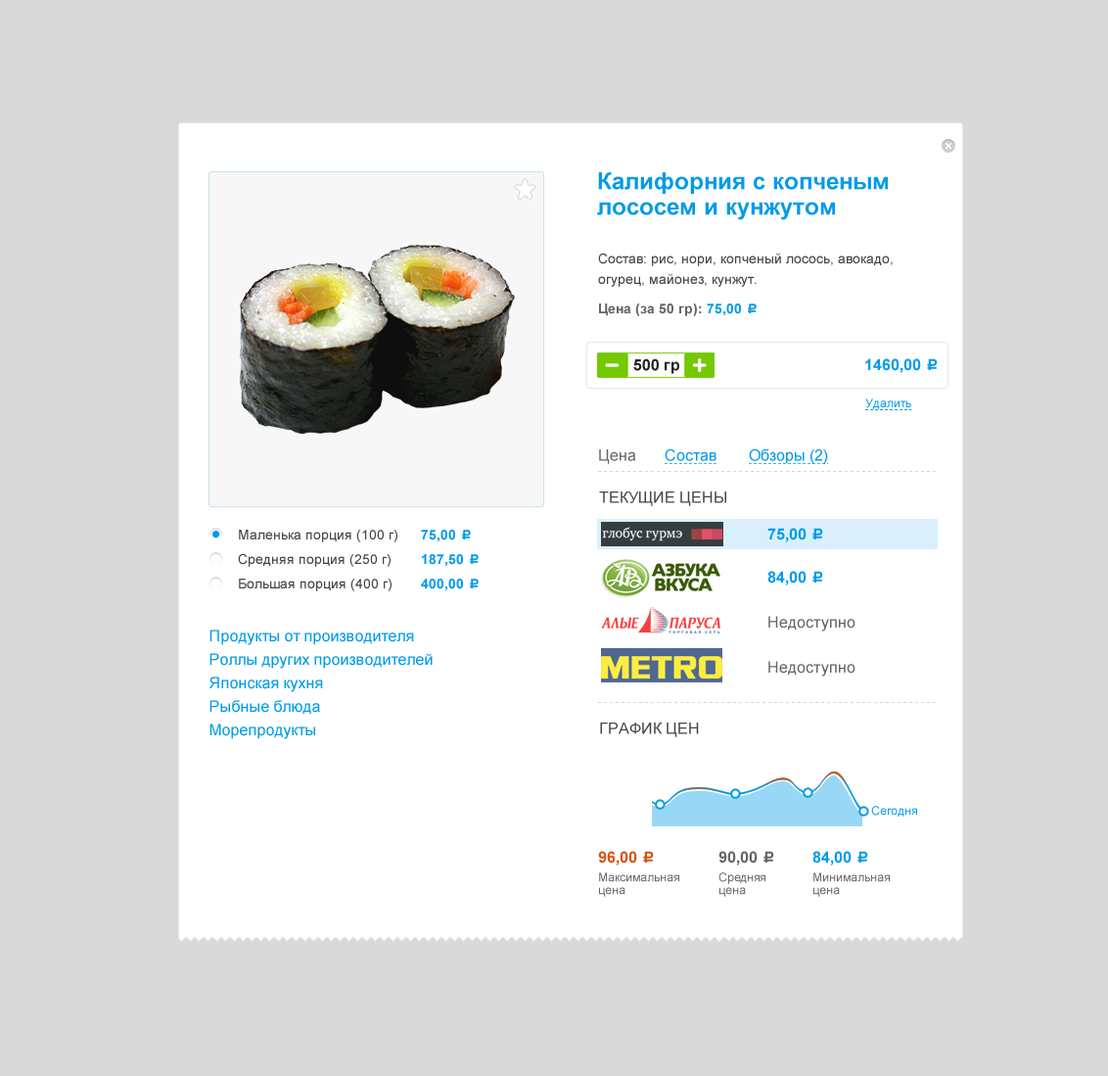
<style>
.page{position:relative;width:1108px;height:1076px;background:#d9d9d9}
.page>*{position:absolute;margin:0}
.t1{font:23.5px/25.5px "Arial-BoldMT";color:#009bea}
.t2{font:13.7px/20.6px "ArialMT";color:#444444}
.t3{font:13.7px "Arial-BoldMT";color:#666666}
.t4{font:13.7px "Arial-BoldMT";color:#009bea}
.t5{font:13.7px "ALSRubl";color:#009bea}
.t6{font:15.7px "Arial-BoldMT";color:#222222}
.t7{font:15.7px "Arial-BoldMT";color:#009bea}
.t8{font:15.7px "ALSRubl";color:#009bea}
.t9{font:11.7px "ArialMT";color:#009bea;text-decoration:underline}
.t10{font:15.7px "ArialMT";color:#666666}
.t11{font:15.7px "ArialMT";color:#009bea;text-decoration:underline}
.t12{font:15.7px "ArialMT";color:#444444;text-transform:uppercase}
.t13{font:13.7px "ArialMT";color:#444444}
.t14{font:15.7px/23.5px "ArialMT";color:#009bea}
.t15{font:11.7px "ArialMT";color:#009bea}
.t16{font:15.7px "Arial-BoldMT";color:#d55415}
.t17{font:15.7px "ALSRubl";color:#d55415}
.t18{font:15.7px "Arial-BoldMT";color:#666666}
.t19{font:15.7px "ALSRubl";color:#666666}
.t20{font:11.7px/12.7px "ArialMT";color:#666666}
</style>
<div class="page">
<p class="t1" style="left:597px;top:172px;width:291px;height:48px">Калифорния с копченым лососем и кунжутом</p>
<p class="t2" style="left:598px;top:253px;width:295px;height:34px">Состав: рис, нори, копченый лосось, авокадо, огурец, майонез, кунжут.</p>
<p class="t3" style="left:599px;top:303px;width:158px;height:13px">Цена (за 50 гр): <span class="t4">75,00 </span><span class="t5">c</span></p>
<p class="t6" style="left:633px;top:358px;width:46px;height:16px">500 гр</p>
<p class="t7" style="left:865px;top:358px;width:73px;height:15px">1460,00 <span class="t8">c</span></p>
<p class="t9" style="left:865px;top:398px;width:47px;height:12px">Удалить</p>
<p class="t10" style="left:599px;top:449px;width:37px;height:15px">Цена</p>
<p class="t11" style="left:665px;top:448px;width:54px;height:17px">Состав</p>
<p class="t11" style="left:749px;top:448px;width:80px;height:17px">Обзоры (2)</p>
<p class="t12" style="left:599px;top:491px;width:127px;height:15px">Текущие цены</p>
<p class="t13" style="left:239px;top:530px;width:158px;height:12px">Маленька порция (100 г)</p>
<p class="t4" style="left:421px;top:530px;width:50px;height:12px">75,00 <span class="t5">c</span></p>
<p class="t7" style="left:768px;top:528px;width:55px;height:14px">75,00 <span class="t8">c</span></p>
<p class="t13" style="left:238px;top:553px;width:153px;height:14px">Средняя порция (250 г)</p>
<p class="t4" style="left:422px;top:554px;width:57px;height:13px">187,50 <span class="t5">c</span></p>
<p class="t13" style="left:239px;top:579px;width:153px;height:12px">Большая порция (400 г)</p>
<p class="t4" style="left:421px;top:579px;width:58px;height:12px">400,00 <span class="t5">c</span></p>
<p class="t7" style="left:768px;top:571px;width:55px;height:14px">84,00 <span class="t8">c</span></p>
<p class="t10" style="left:769px;top:616px;width:87px;height:15px">Недоступно</p>
<p class="t14" style="left:210px;top:630px;width:223px;height:109px">Продукты от производителя<br>Роллы других производителей<br>Японская кухня<br>Рыбные блюда<br>Морепродукты</p>
<p class="t10" style="left:769px;top:661px;width:87px;height:16px">Недоступно</p>
<p class="t12" style="left:600px;top:723px;width:99px;height:14px">ГРАФИК ЦЕН</p>
<p class="t15" style="left:871px;top:806px;width:46px;height:11px">Сегодня</p>
<p class="t16" style="left:598px;top:851px;width:56px;height:14px">96,00 <span class="t17">c</span></p>
<p class="t18" style="left:719px;top:851px;width:55px;height:14px">90,00 <span class="t19">c</span></p>
<p class="t7" style="left:813px;top:851px;width:55px;height:14px">84,00 <span class="t8">c</span></p>
<p class="t20" style="left:599px;top:872px;width:80px;height:25px">Максимальная<br>цена</p>
<p class="t20" style="left:719px;top:872px;width:47px;height:25px">Средняя<br>цена</p>
<p class="t20" style="left:814px;top:872px;width:76px;height:25px">Минимальная <br>цена</p>
</div>
